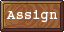
<style>
.page{position:relative;width:64px;height:32px;background:#8f5030}
.page>*{position:absolute;margin:0}
.t1{font:14px "Courier-Bold";color:#ffffff}
</style>
<div class="page">
<p class="t1" style="left:7px;top:10px;width:50px;height:12px">Assign</p>
</div>
